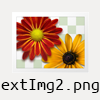
<style>
.page{position:relative;width:100px;height:100px;background:#f2f1ef}
.page>*{position:absolute;margin:0}
.t1{font:18px "UbuntuMono-Regular";color:#010101}
</style>
<div class="page">
<p class="t1" style="left:1px;top:79px;width:98px;height:14px">extImg2.png</p>
</div>
